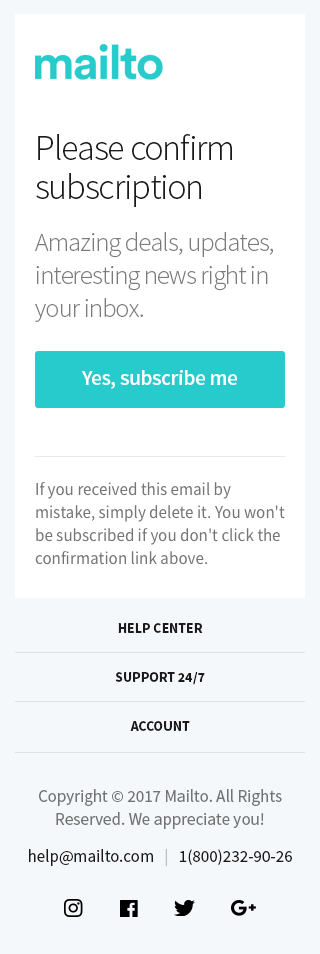
<style>
.page{position:relative;width:320px;height:954px;background:#ffffff}
.page>*{position:absolute;margin:0}
.t1{font:36px/39px "SourceSansPro-Light";letter-spacing:-0.03em;color:#1a1a1a}
.t2{font:26px/33px "SourceSansPro-Light";letter-spacing:-0.027em;color:#7b7b7b}
.t3{font:21px "SourceSansPro-Semibold";letter-spacing:-0.009em;color:#ffffff}
.t4{font:17px/23px "SourceSansPro-Regular";color:#767676}
.t5{font:14px/49px "SourceSansPro-Bold";color:#1a1a1a}
.t6{font:17px/23px "SourceSansPro-Regular";color:#727374}
.t7{font:17px/23px "SourceSansPro-Regular";color:#1a1a1a}
.t8{font:17px/23px "SourceSansPro-Regular";color:#bebebe}
</style>
<div class="page">
<p class="t1" style="left:36px;top:134px;width:196px;height:73px">Please confirm subscription</p>
<p class="t2" style="left:35px;top:232px;width:238px;height:90px">Amazing deals, updates, interesting news right in your inbox.</p>
<p class="t3" style="left:82px;top:370px;width:155px;height:19px">Yes, subscribe me</p>
<p class="t4" style="left:35px;top:482px;width:250px;height:83px">If you received this email by mistake, simply delete it. You won't be subscribed if you don't click the confirmation link above.</p>
<p class="t5" style="left:115px;top:623px;width:90px;height:108px;text-align:center">HELP CENTER<br>SUPPORT 24/7<br>ACCOUNT</p>
<p class="t6" style="left:29px;top:789px;width:263px;height:78px;text-align:center">Copyright © 2017 Mailto. All Rights Reserved. We appreciate you!<br><span class="t7">help@mailto.com   </span><span class="t8">|   </span><span class="t7">1(800)232-90-26</span></p>
</div>
